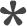
<style>
.page{position:relative;width:27px;height:26px;background:#ffffff}
.page>*{position:absolute;margin:0}
.t1{font:100px "JCkg";color:#444444}
</style>
<div class="page">
<p class="t1" style="left:0px;top:0px;width:27px;height:26px">*</p>
</div>
